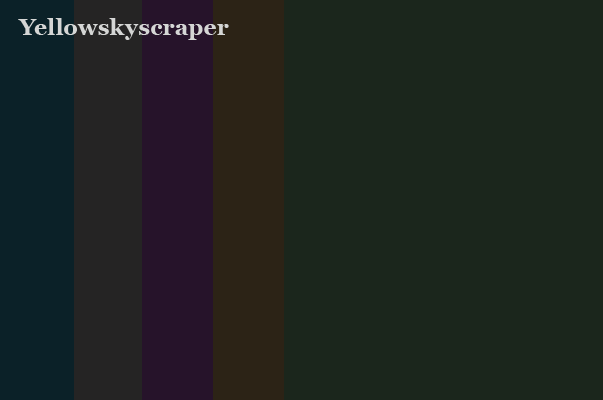
<style>
.page{position:relative;width:603px;height:400px;background:#1b261c}
.page>*{position:absolute;margin:0}
.t1{font:23px "Georgia-Bold";letter-spacing:0.01em;color:#d5d6d5}
</style>
<div class="page">
<p class="t1" style="left:18px;top:18px;width:211px;height:22px">Yellowskyscraper</p>
</div>
